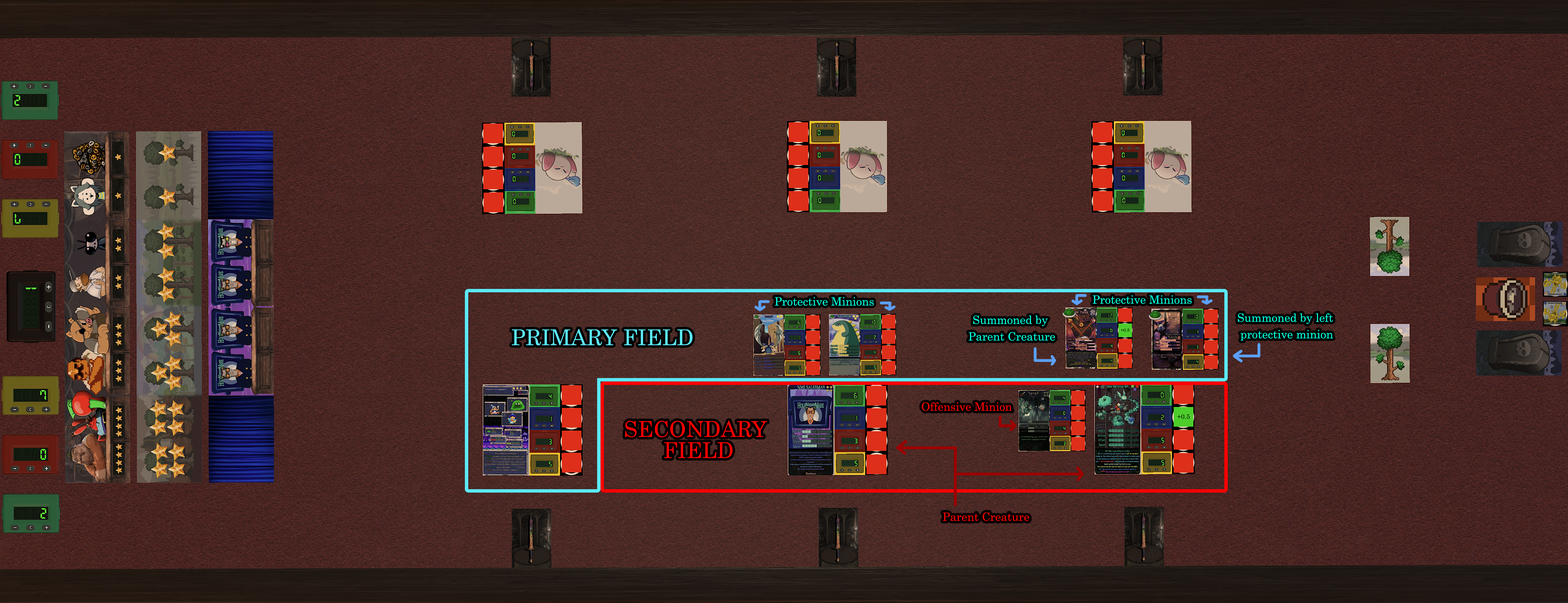
<style>
.page{position:relative;width:1568px;height:603px}
.page>*{position:absolute;margin:0}
.t1{font:19.6px "Century";color:#00ffde}
.t2{font:19.6px/16.6px "Century";color:#00ffde}
.t3{font:37.4px "Century";color:#5be9f6}
.t4{font:19.6px "Century";color:#ff0000}
.t5{font:37.4px/21.2px "Century";color:#ff0000}
</style>
<div class="page">
<p class="t1" style="left:775px;top:297px;width:99px;height:9px">Protective Minions</p>
<p class="t1" style="left:1093px;top:295px;width:99px;height:9px">Protective Minions</p>
<p class="t2" style="left:968px;top:315px;width:87px;height:26px;text-align:center">Summoned by <br>Parent Creature</p>
<p class="t2" style="left:1238px;top:313px;width:95px;height:28px;text-align:center">Summoned by left<br> protective minion</p>
<p class="t3" style="left:512px;top:329px;width:181px;height:17px">PRIMARY FIELD</p>
<p class="t4" style="left:922px;top:402px;width:90px;height:9px">Offensive Minion</p>
<p class="t5" style="left:625px;top:421px;width:142px;height:37px;text-align:center">SECONDARY <br>FIELD</p>
<p class="t4" style="left:943px;top:512px;width:86px;height:9px">Parent Creature</p>
</div>
